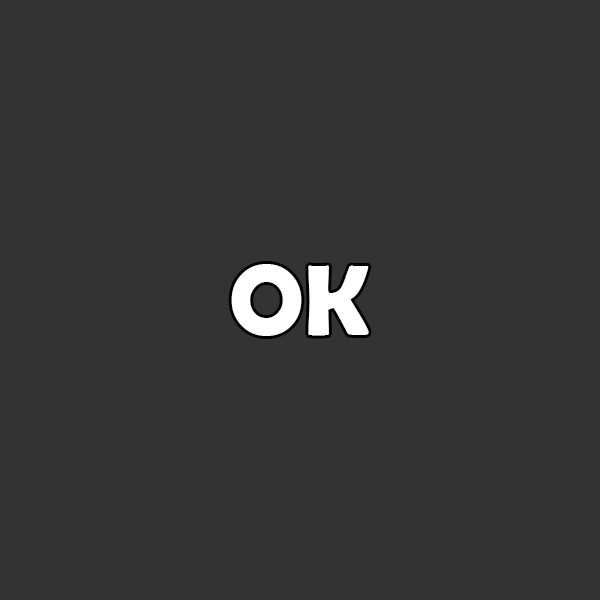
<style>
.page{position:relative;width:600px;height:600px;background:#333333}
.page>*{position:absolute;margin:0}
.t1{font:100px "BerlinSansFBDemi-Bold";color:#ffffff}
</style>
<div class="page">
<p class="t1" style="left:231px;top:264px;width:138px;height:72px">OK</p>
</div>
